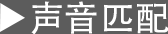
<style>
.page{position:relative;width:168px;height:34px;background:#5c5c5c}
.page>*{position:absolute;margin:0}
.t1{font:34.9px "AdobeHeitiStd-Regular";color:#ffffff}
</style>
<div class="page">
<p class="t1" style="left:31px;top:1px;width:138px;height:34px">声音匹配</p>
</div>
